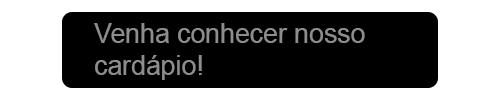
<style>
.page{position:relative;width:500px;height:100px;background:#000000}
.page>*{position:absolute;margin:0}
.t1{font:26.7px "ArialMT";color:#8d8d8d}
</style>
<div class="page">
<p class="t1" style="left:94px;top:23px;width:271px;height:57px">Venha conhecer nosso cardápio!</p>
</div>
